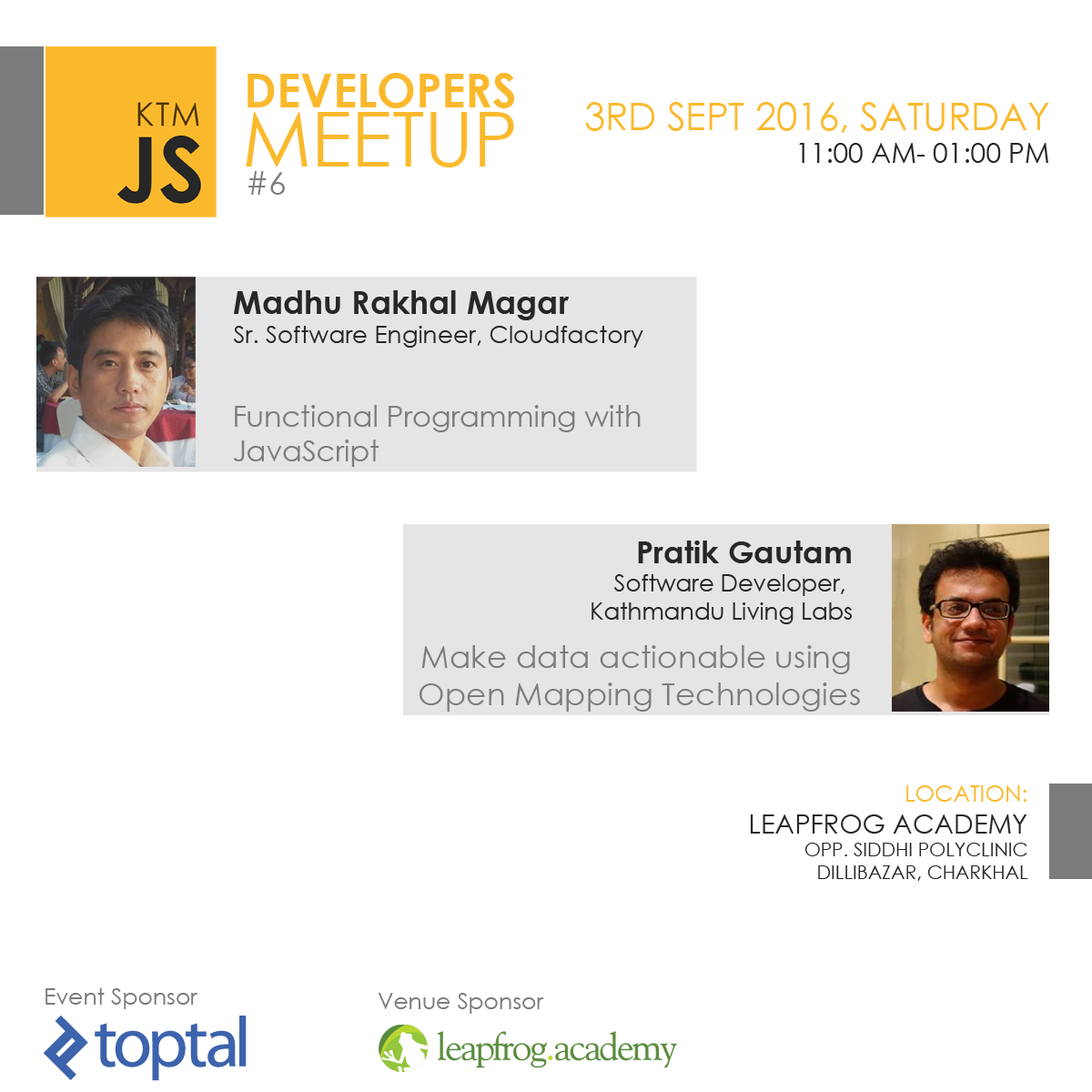
<style>
.page{position:relative;width:1092px;height:1092px;background:#ffffff}
.page>*{position:absolute;margin:0}
.t1{font:46px "CenturyGothic-Bold";color:#fab92d}
.t2{font:37.9px "CenturyGothic";color:#fab92d;text-transform:uppercase}
.t3{font:27.3px "CenturyGothic";color:#272727;text-transform:uppercase}
.t4{font:75.3px "CenturyGothic";color:#fab92d}
.t5{font:32.2px "CenturyGothic";color:#7c7c7c}
.t6{font:24px "CenturyGothic";color:#272727}
.t7{font:32px "CenturyGothic-Bold";color:#272727}
.t8{font:29px "CenturyGothic";color:#7c7c7c}
.t9{font:23.5px "CenturyGothic";color:#272727}
.t10{font:31.3px "CenturyGothic-Bold";color:#272727}
.t11{font:31.3px "CenturyGothic";color:#7c7c7c}
.t12{font:19px "CenturyGothic";color:#272727;text-transform:uppercase}
.t13{font:22.7px "CenturyGothic";color:#fab92d;text-transform:uppercase}
.t14{font:26.5px "CenturyGothic";color:#272727;text-transform:uppercase}
.t15{font:22.7px "CenturyGothic";color:#7c7c7c}
</style>
<div class="page">
<p class="t1" style="left:248px;top:73px;width:266px;height:35px">DEVELOPERS</p>
<p class="t2" style="left:585px;top:102px;width:464px;height:61px;text-align:right">3rd Sept 2016, Saturday<br><span class="t3">11:00 AM- 01:00 PM</span></p>
<p class="t4" style="left:246px;top:112px;width:268px;height:55px">MEETUP</p>
<p class="t5" style="left:248px;top:171px;width:37px;height:24px">#6</p>
<p class="t6" style="left:234px;top:290px;width:409px;height:58px"><span class="t7">Madhu Rakhal Magar<br></span>Sr. Software Engineer, Cloudfactory</p>
<p class="t8" style="left:233px;top:405px;width:408px;height:62px">Functional Programming with<br>JavaScript</p>
<p class="t9" style="left:591px;top:541px;width:261px;height:83px;text-align:right"><span class="t10">Pratik Gautam<br></span>Software Developer, <br>Kathmandu Living Labs</p>
<p class="t11" style="left:420px;top:645px;width:440px;height:67px;text-align:right">Make data actionable using <br>Open Mapping Technologies</p>
<p class="t12" style="left:750px;top:785px;width:278px;height:96px;text-align:right"><span class="t13">Location:<br></span><span class="t14">Leapfrog ACADEMY<br></span>opp. siddhi polyclinic<br>dillibazar, Charkhal</p>
<p class="t15" style="left:45px;top:988px;width:152px;height:21px">Event Sponsor</p>
<p class="t15" style="left:378px;top:993px;width:166px;height:21px">Venue Sponsor</p>
</div>
